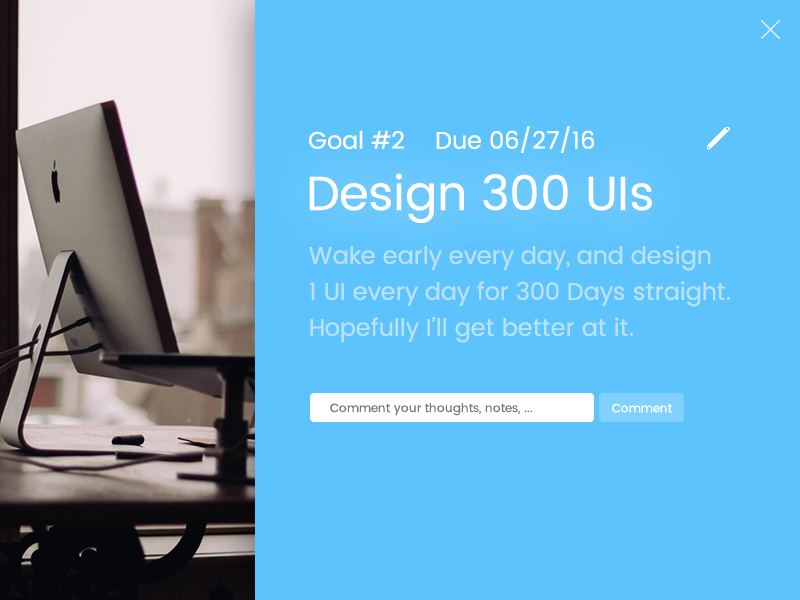
<style>
.page{position:relative;width:800px;height:600px;background:#5dc3fd}
.page>*{position:absolute;margin:0}
.t1{font:24px "Poppins-Regular";color:#ffffff}
.t2{font:48px "Poppins-Regular";color:#ffffff}
.t3{font:24px/36px "Poppins-Regular";color:#bae2fe}
.t4{font:12px "Poppins-Regular";color:#777777}
.t5{font:12px "Poppins-Regular";color:#ffffff}
</style>
<div class="page">
<p class="t1" style="left:436px;top:126px;width:158px;height:27px">Due 06/27/16</p>
<p class="t1" style="left:309px;top:130px;width:95px;height:19px">Goal #2</p>
<p class="t2" style="left:309px;top:173px;width:343px;height:50px">Design 300 UIs</p>
<p class="t3" style="left:309px;top:245px;width:421px;height:98px">Wake early every day, and design<br>1 UI every day for 300 Days straight.<br>Hopefully I’ll get better at it.</p>
<p class="t4" style="left:330px;top:403px;width:202px;height:13px">Comment your thoughts, notes, ...</p>
<p class="t5" style="left:612px;top:403px;width:60px;height:10px">Comment</p>
</div>
